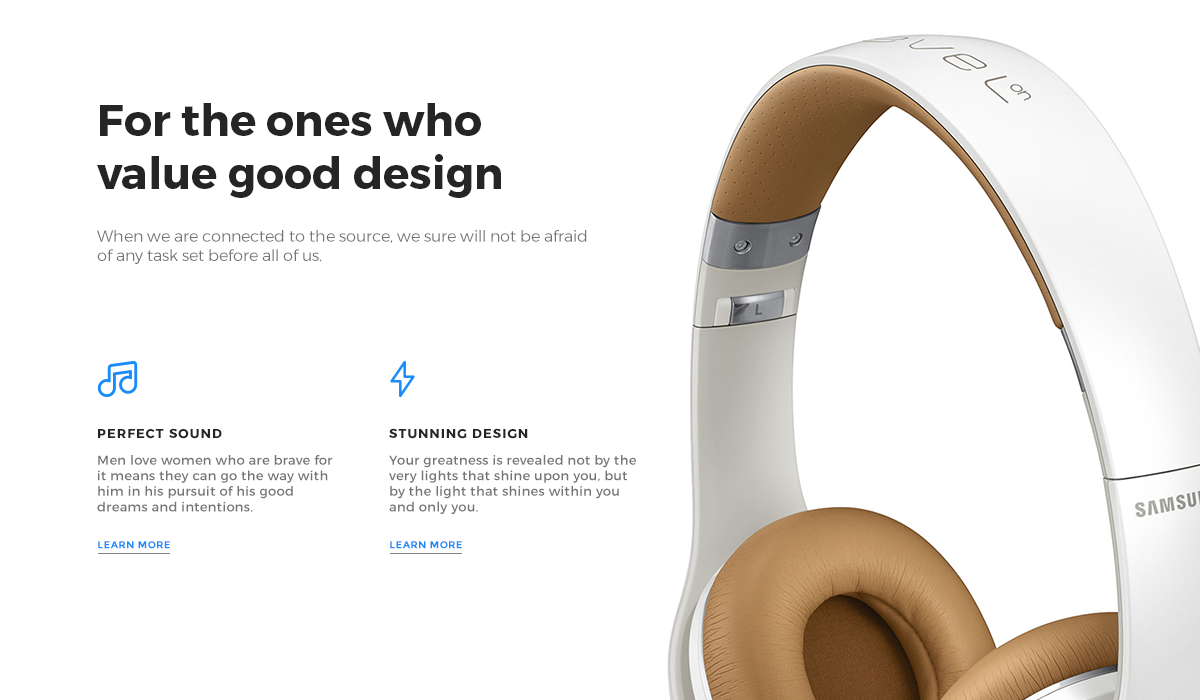
<style>
.page{position:relative;width:1200px;height:700px;background:#ffffff}
.page>*{position:absolute;margin:0}
.t1{font:44px "Montserrat-Bold";color:#242526}
.t2{font:16px "Montserrat-Light";color:#747474}
.t3{font:13px "Montserrat-Bold";letter-spacing:0.08em;color:#242526;text-transform:uppercase}
.t4{font:13px "Montserrat-Regular";letter-spacing:0.025em;color:#747474}
.t5{font:10px "Montserrat-Bold";letter-spacing:0.04em;color:#1b8bf9;text-transform:uppercase}
</style>
<div class="page">
<p class="t1" style="left:97px;top:103px;width:404px;height:95px">For the ones who <br>value good design</p>
<p class="t2" style="left:97px;top:230px;width:490px;height:34px">When we are connected to the source, we sure will not be afraid of any task set before all of us.</p>
<p class="t3" style="left:98px;top:428px;width:124px;height:11px">Perfect sound</p>
<p class="t3" style="left:389px;top:428px;width:139px;height:11px">Stunning design</p>
<p class="t4" style="left:97px;top:455px;width:236px;height:57px">Men love women who are brave for it means they can go the way with him in his pursuit of his good dreams and intentions.</p>
<p class="t4" style="left:389px;top:455px;width:247px;height:59px">Your greatness is revealed not by the very lights that shine upon you, but by the light that shines within you and only you.</p>
<p class="t5" style="left:98px;top:541px;width:72px;height:8px">Learn more</p>
<p class="t5" style="left:390px;top:541px;width:72px;height:8px">Learn more</p>
</div>
